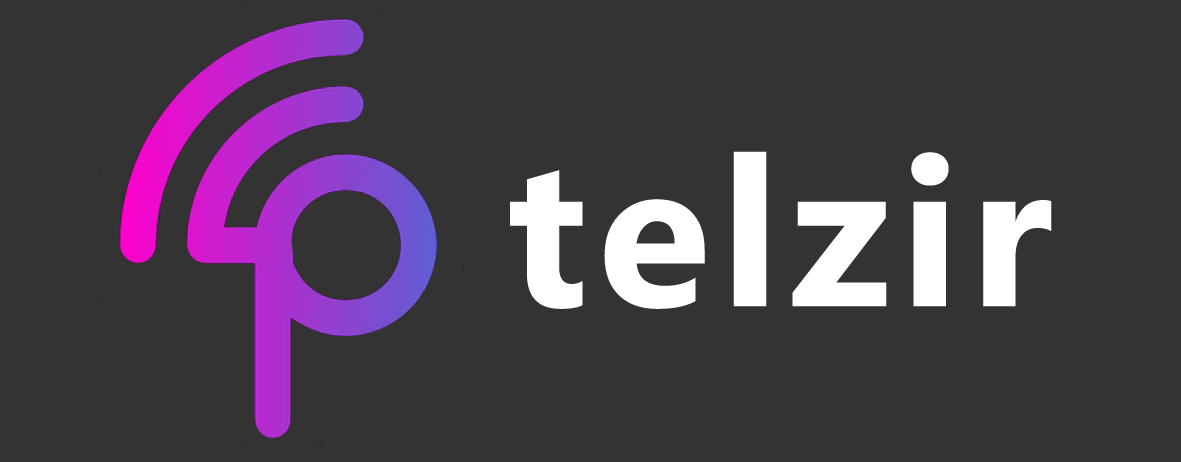
<style>
.page{position:relative;width:1181px;height:462px;background:#333333}
.page>*{position:absolute;margin:0}
.t1{font:208.5px "Gadugi-Bold";letter-spacing:0.05em;color:#ffffff}
</style>
<div class="page">
<p class="t1" style="left:510px;top:151px;width:542px;height:158px">telzir</p>
</div>
